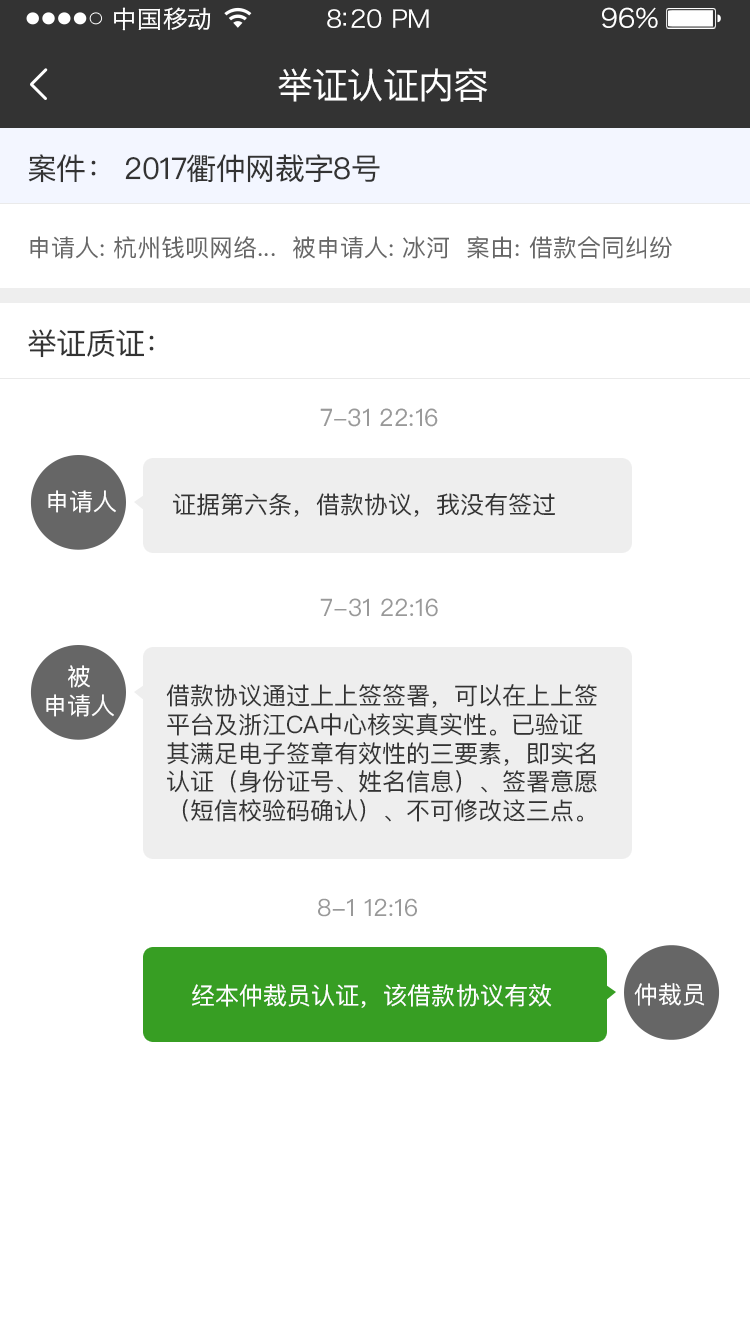
<style>
.page{position:relative;width:750px;height:1334px;background:#ffffff}
.page>*{position:absolute;margin:0}
.t1{font:24px "HiraginoSansGB-W3";letter-spacing:0.02em;color:#ffffff;scale:1.03 1}
.t2{font:24px "HiraginoSansGB-W3";letter-spacing:-0.02em;color:#ffffff;scale:1.03 1}
.t3{font:26.2px "HiraginoSansGB-W3";letter-spacing:-0.02em;color:#ffffff;scale:1.03 1}
.t4{font:36px "PingFangSC-Regular";letter-spacing:-0.02em;color:#ffffff}
.t5{font:30px "PingFangSC-Regular";letter-spacing:-0.02em;color:#333333}
.t6{font:24px "PingFangSC-Regular";color:#666666}
.t7{font:24px "PingFangSC-Regular";color:#999999}
.t8{font:24px "PingFangSC-Regular";color:#ffffff}
.t9{font:24px "PingFangSC-Regular";color:#333333}
.t10{font:23.8px "PingFangSC-Regular";color:#999999}
</style>
<div class="page">
<p class="t1" style="left:114px;top:7px;width:97px;height:24px">中国移动</p>
<p class="t2" style="left:327px;top:9px;width:102px;height:19px">8:20 PM</p>
<p class="t3" style="left:602px;top:7px;width:56px;height:22px">96%</p>
<p class="t4" style="left:278px;top:68px;width:210px;height:34px">举证认证内容</p>
<p class="t5" style="left:28px;top:154px;width:352px;height:29px">案件： 2017衢仲网裁字8号</p>
<p class="t6" style="left:30px;top:236px;width:642px;height:23px">申请人: 杭州钱呗网络...  被申请人: 冰河  案由: 借款合同纠纷</p>
<p class="t5" style="left:28px;top:329px;width:126px;height:29px">举证质证：</p>
<p class="t7" style="left:320px;top:408px;width:118px;height:19px">7-31 22:16</p>
<p class="t8" style="left:48px;top:490px;width:68px;height:23px">申请人</p>
<p class="t9" style="left:173px;top:493px;width:382px;height:24px">证据第六条，借款协议，我没有签过</p>
<p class="t7" style="left:320px;top:598px;width:118px;height:19px">7-31 22:16</p>
<p class="t8" style="left:46px;top:665px;width:68px;height:52px;text-align:center">被<br>申请人</p>
<p class="t9" style="left:166px;top:684px;width:431px;height:138px">借款协议通过上上签签署，可以在上上签<br>平台及浙江CA中心核实真实性。已验证<br>其满足电子签章有效性的三要素，即实名<br>认证（身份证号、姓名信息）、签署意愿<br>（短信校验码确认）、不可修改这三点。</p>
<p class="t10" style="left:318px;top:898px;width:99px;height:19px">8-1 12:16</p>
<p class="t8" style="left:192px;top:984px;width:360px;height:24px">经本仲裁员认证，该借款协议有效</p>
<p class="t8" style="left:634px;top:983px;width:71px;height:23px">仲裁员</p>
</div>
